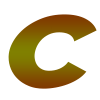
<style>
.page{position:relative;width:100px;height:100px;background:#ffffff}
.page>*{position:absolute;margin:0}
.t1{font:103.4px "Raleway-BlackItalic";scale:1.26 1}
</style>
<div class="page">
<p class="t1" style="left:8px;top:14px;width:89px;height:75px">C</p>
</div>
